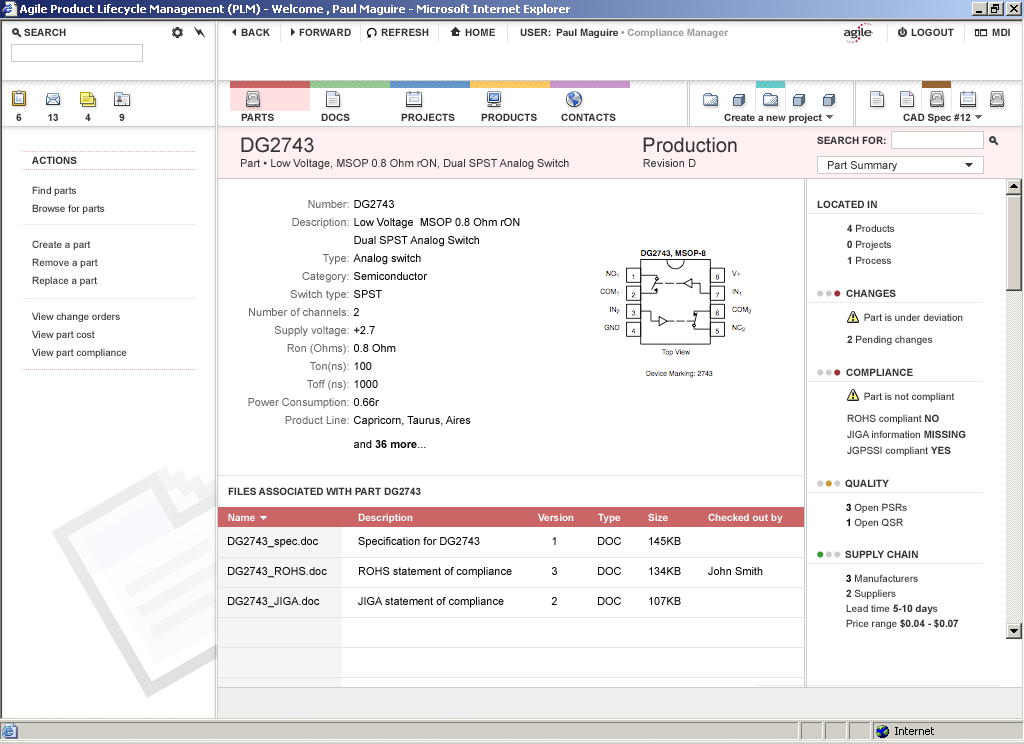
<style>
.page{position:relative;width:1024px;height:744px;background:#ffffff}
.page>*{position:absolute;margin:0}
.t1{font:20px "ArialMT";color:#333333}
.t2{font:10px "Arial-BoldMT";color:#333333}
.t3{font:11px "ArialMT";color:#333333}
.t4{font:10px/18px "ArialMT";color:#333333}
.t5{font:11px/18px "ArialMT";color:#666666}
.t6{font:11px/18px "ArialMT";color:#000000}
.t7{font:11px/18px "Arial-BoldMT";color:#000000}
.t8{font:10px/16px "ArialMT";color:#333333}
.t9{font:10px/16px "Arial-BoldMT";color:#333333}
.t10{font:24px "ArialMT";color:#cccccc}
.t11{font:24px "ArialMT";color:#993333}
.t12{font:24px "ArialMT";color:#cc9933}
.t13{font:10px/15px "ArialMT";color:#333333}
.t14{font:10px/15px "Arial-BoldMT";color:#000000}
.t15{font:10px "Arial-BoldMT";color:#ffffff}
.t16{font:11px/30px "ArialMT";color:#000000}
.t17{font:24px "ArialMT";color:#339933}
.t18{font:11px "ArialMT";color:#000000}
.t19{font:10px/15px "Arial-BoldMT";color:#333333}
</style>
<div class="page">
<p class="t1" style="left:241px;top:137px;width:496px;height:16px">DG2743                                                           Production</p>
<p class="t2" style="left:817px;top:136px;width:69px;height:8px">SEARCH FOR:</p>
<p class="t2" style="left:32px;top:156px;width:45px;height:8px">ACTIONS</p>
<p class="t3" style="left:241px;top:159px;width:455px;height:11px">Part • Low Voltage, MSOP 0.8 Ohm rON, Dual SPST Analog Switch                        Revision D</p>
<p class="t3" style="left:828px;top:161px;width:69px;height:11px">Part Summary</p>
<p class="t4" style="left:32px;top:186px;width:95px;height:172px">Find parts<br>Browse for parts<br><br>Create a part<br>Remove a part<br>Replace a part<br><br>View change orders<br>View part cost<br>View part compliance</p>
<p class="t5" style="left:248px;top:200px;width:101px;height:224px;text-align:right">Number:<br>Description:<br><br>Type:<br>Category:<br>Switch type:<br>Number of channels:<br>Supply voltage:<br>Ron (Ohms):<br>Ton(ns):<br>Toff (ns):<br>Power Consumption:<br>Product Line:</p>
<p class="t6" style="left:353px;top:200px;width:167px;height:248px">DG2743<br>Low Voltage  MSOP 0.8 Ohm rON<br>Dual SPST Analog Switch<br>Analog switch<br>Semiconductor<br>SPST<br>2<br>+2.7<br>0.8 Ohm<br>100<br>1000<br>0.66r<br>Capricorn, Taurus, Aires<br>and <span class="t7">36 more</span>...</p>
<p class="t2" style="left:817px;top:200px;width:60px;height:8px">LOCATED IN</p>
<p class="t8" style="left:847px;top:224px;width:48px;height:40px"><span class="t9">4</span> Products<br><span class="t9">0</span> Projects<br><span class="t9">1</span> Process</p>
<p class="t10" style="left:817px;top:290px;width:24px;height:7px">••<span class="t11">•</span></p>
<p class="t2" style="left:846px;top:289px;width:50px;height:8px">CHANGES</p>
<p class="t8" style="left:847px;top:313px;width:116px;height:32px">Part is under deviation<br><span class="t9">2 </span>Pending changes</p>
<p class="t10" style="left:817px;top:369px;width:24px;height:7px">••<span class="t11">•</span></p>
<p class="t2" style="left:846px;top:368px;width:67px;height:8px">COMPLIANCE</p>
<p class="t8" style="left:847px;top:392px;width:119px;height:64px">Part is not compliant<br>ROHS compliant <span class="t9">NO<br></span>JIGA information <span class="t9">MISSING<br></span>JGPSSI compliant <span class="t9">YES</span></p>
<p class="t10" style="left:817px;top:480px;width:24px;height:7px">•<span class="t12">•</span>•</p>
<p class="t2" style="left:845px;top:479px;width:44px;height:9px">QUALITY</p>
<p class="t2" style="left:228px;top:487px;width:193px;height:8px">FILES ASSOCIATED WITH PART DG2743</p>
<p class="t13" style="left:846px;top:503px;width:61px;height:25px"><span class="t14">3 </span>Open PSRs<br><span class="t14">1 </span>Open QSR</p>
<p class="t15" style="left:228px;top:513px;width:27px;height:8px">Name</p>
<p class="t15" style="left:358px;top:513px;width:55px;height:10px">Description</p>
<p class="t15" style="left:538px;top:513px;width:36px;height:8px">Version</p>
<p class="t15" style="left:598px;top:513px;width:23px;height:10px">Type</p>
<p class="t15" style="left:648px;top:513px;width:20px;height:8px">Size</p>
<p class="t15" style="left:708px;top:513px;width:75px;height:10px">Checked out by</p>
<p class="t16" style="left:228px;top:537px;width:99px;height:71px">DG2743_spec.doc<br>DG2743_ROHS.doc<br>DG2743_JIGA.doc</p>
<p class="t16" style="left:358px;top:537px;width:154px;height:71px">Specification for DG2743<br>ROHS statement of compliance<br>JIGA statement of compliance</p>
<p class="t16" style="left:551px;top:537px;width:6px;height:68px">1<br>3<br>2</p>
<p class="t16" style="left:598px;top:537px;width:23px;height:68px">DOC<br>DOC<br>DOC</p>
<p class="t16" style="left:649px;top:537px;width:32px;height:68px">145KB<br>134KB<br>107KB</p>
<p class="t10" style="left:817px;top:551px;width:24px;height:7px"><span class="t17">•</span>••</p>
<p class="t2" style="left:845px;top:550px;width:73px;height:8px">SUPPLY CHAIN</p>
<p class="t18" style="left:708px;top:567px;width:55px;height:8px">John Smith</p>
<p class="t13" style="left:846px;top:574px;width:113px;height:55px"><span class="t14">3</span> Manufacturers<br><span class="t19">2</span> Suppliers<br>Lead time <span class="t19">5-10 day</span>s<br>Price range <span class="t19">$0.04 - $0.07</span></p>
</div>
